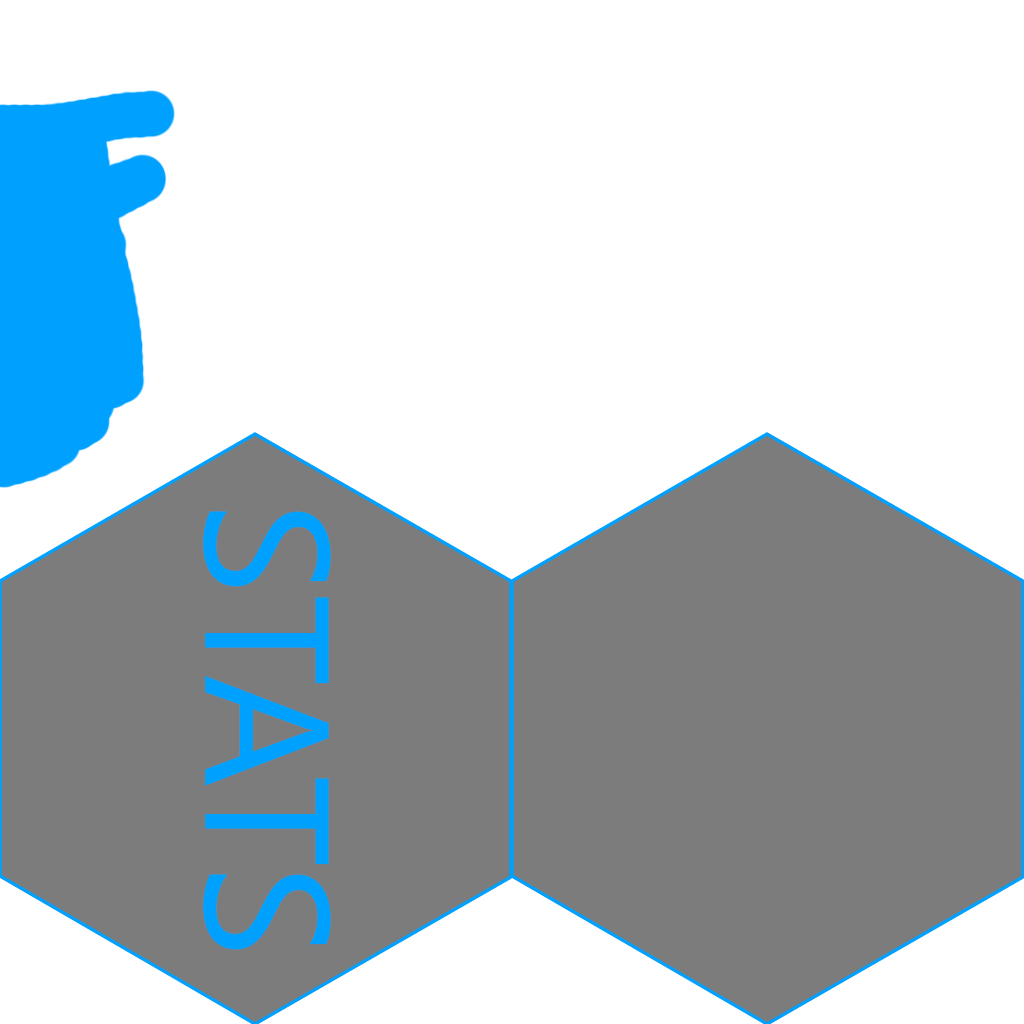
<style>
.page{position:relative;width:1024px;height:1024px;background:#ffffff}
.page>*{position:absolute;margin:0}
.t1{font:176px "SegoeUI";color:#00a0ff}
.t2{font:176px "SegoeUI";color:#ffffff}
</style>
<div class="page">
<p class="t1" style="left:203px;top:511px;width:128px;height:439px;rotate:90deg"><span class="t2"><br><br><br><br><br><br><br><br><br><br><br><br><br><br><br><br></span>STATS</p>
</div>
